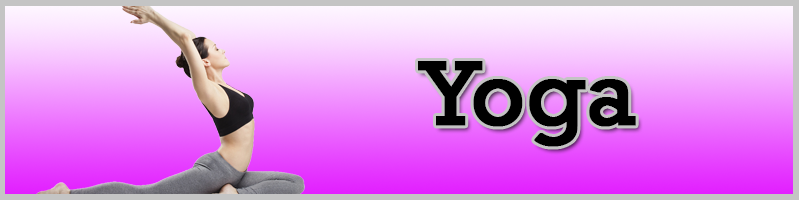
<style>
.page{position:relative;width:800px;height:200px}
.page>*{position:absolute;margin:0}
.t1{font:93px "Rockwell";color:#000000;font-weight:bold}
</style>
<div class="page">
<p class="t1" style="left:418px;top:61px;width:218px;height:86px">Yoga</p>
</div>
